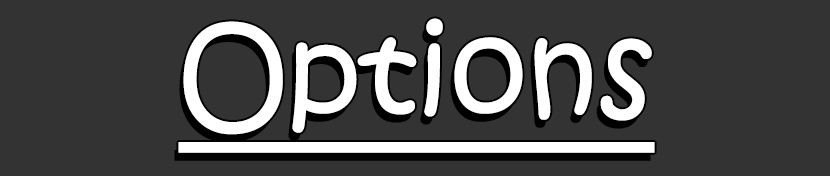
<style>
.page{position:relative;width:830px;height:176px;background:#333333}
.page>*{position:absolute;margin:0}
.t1{font:124.4px "KristenITC-Regular";color:#ffffff;text-decoration:underline}
</style>
<div class="page">
<p class="t1" style="left:178px;top:18px;width:477px;height:135px">Options</p>
</div>
